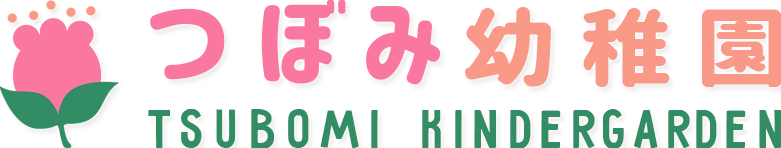
<style>
.page{position:relative;width:781px;height:148px;background:#ffffff}
.page>*{position:absolute;margin:0}
.t1{font:100px "Corporate-Logo-Rounded";color:#fa78a0;scale:1.08 1}
.t2{font:85px "Corporate-Logo-Rounded";color:#f99a88;scale:1.08 1}
.t3{font:60px "Pribambas-Regular";color:#328c64}
</style>
<div class="page">
<p class="t1" style="left:150px;top:0px;width:632px;height:87px">つぼみ<span class="t2">幼稚園</span></p>
<p class="t3" style="left:148px;top:108px;width:634px;height:41px">TSUBOMIKinderGarden</p>
</div>
